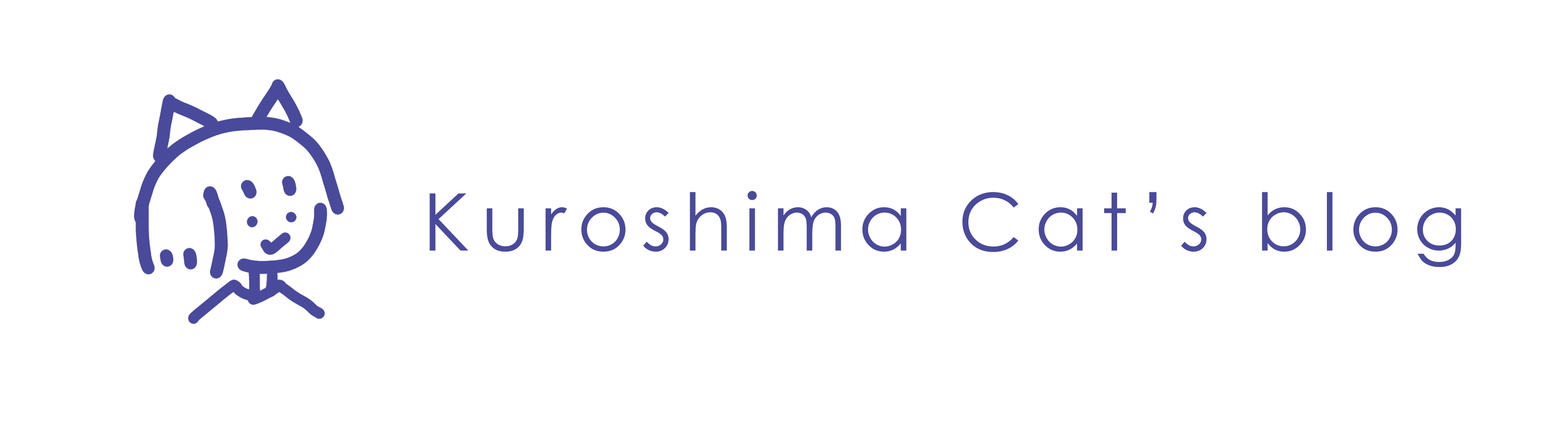
<style>
.page{position:relative;width:1568px;height:423px;background:#ffffff}
.page>*{position:absolute;margin:0}
.t1{font:79.3px "CenturyGothic";letter-spacing:0.15em;color:#4a4a9c}
</style>
<div class="page">
<p class="t1" style="left:429px;top:191px;width:1032px;height:76px">Kuroshima Cat’s blog</p>
</div>
